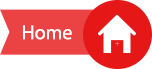
<style>
.page{position:relative;width:152px;height:69px;background:#ffffff}
.page>*{position:absolute;margin:0}
.t1{font:20px "MyriadPro-Regular";color:#ffffff}
</style>
<div class="page">
<p class="t1" style="left:23px;top:25px;width:49px;height:15px">Home</p>
</div>
